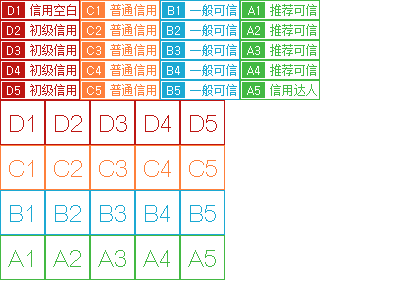
<style>
.page{position:relative;width:400px;height:300px;background:#ffffff}
.page>*{position:absolute;margin:0}
.t1{font:12px "Dotum";color:#ffffff}
.t2{font:12px "SimSun";color:#bd1613}
.t3{font:12px "SimSun";color:#fe803b}
.t4{font:12px "SimSun";color:#1ca9d3}
.t5{font:12px "SimSun";color:#43b943}
.t6{font:36px "BrowalliaNew";color:#bd1613}
.t7{font:36px "BrowalliaNew";color:#fe803b}
.t8{font:36px "BrowalliaNew";color:#1ca9d3}
.t9{font:36px "BrowalliaNew";color:#43b943}
</style>
<div class="page">
<p class="t1" style="left:8px;top:6px;width:11px;height:9px">D1</p>
<p class="t2" style="left:30px;top:4px;width:46px;height:12px">信用空白</p>
<p class="t1" style="left:87px;top:6px;width:12px;height:9px">C1</p>
<p class="t3" style="left:110px;top:4px;width:46px;height:12px">普通信用</p>
<p class="t1" style="left:168px;top:6px;width:11px;height:9px">B1</p>
<p class="t4" style="left:190px;top:4px;width:47px;height:12px">一般可信</p>
<p class="t1" style="left:248px;top:6px;width:11px;height:9px">A1</p>
<p class="t5" style="left:270px;top:4px;width:47px;height:12px">推荐可信</p>
<p class="t1" style="left:7px;top:26px;width:13px;height:9px">D2</p>
<p class="t2" style="left:30px;top:24px;width:46px;height:12px">初级信用</p>
<p class="t1" style="left:87px;top:26px;width:14px;height:9px">C2</p>
<p class="t3" style="left:110px;top:24px;width:46px;height:12px">普通信用</p>
<p class="t1" style="left:167px;top:26px;width:13px;height:9px">B2</p>
<p class="t4" style="left:190px;top:24px;width:47px;height:12px">一般可信</p>
<p class="t1" style="left:247px;top:26px;width:13px;height:9px">A2</p>
<p class="t5" style="left:270px;top:24px;width:47px;height:12px">推荐可信</p>
<p class="t1" style="left:7px;top:46px;width:13px;height:9px">D3</p>
<p class="t2" style="left:30px;top:44px;width:46px;height:12px">初级信用</p>
<p class="t1" style="left:87px;top:46px;width:14px;height:9px">C3</p>
<p class="t3" style="left:110px;top:44px;width:46px;height:12px">普通信用</p>
<p class="t1" style="left:167px;top:46px;width:13px;height:9px">B3</p>
<p class="t4" style="left:190px;top:44px;width:47px;height:12px">一般可信</p>
<p class="t1" style="left:247px;top:46px;width:13px;height:9px">A3</p>
<p class="t5" style="left:270px;top:44px;width:47px;height:12px">推荐可信</p>
<p class="t2" style="left:30px;top:64px;width:46px;height:12px">初级信用</p>
<p class="t3" style="left:110px;top:64px;width:46px;height:12px">普通信用</p>
<p class="t4" style="left:190px;top:64px;width:47px;height:12px">一般可信</p>
<p class="t5" style="left:270px;top:64px;width:47px;height:12px">推荐可信</p>
<p class="t1" style="left:7px;top:66px;width:13px;height:9px">D4</p>
<p class="t1" style="left:87px;top:66px;width:14px;height:9px">C4</p>
<p class="t1" style="left:167px;top:66px;width:13px;height:9px">B4</p>
<p class="t1" style="left:247px;top:66px;width:13px;height:9px">A4</p>
<p class="t1" style="left:7px;top:86px;width:13px;height:9px">D5</p>
<p class="t2" style="left:30px;top:84px;width:46px;height:12px">初级信用</p>
<p class="t1" style="left:87px;top:86px;width:14px;height:9px">C5</p>
<p class="t3" style="left:110px;top:84px;width:46px;height:12px">普通信用</p>
<p class="t1" style="left:167px;top:86px;width:13px;height:9px">B5</p>
<p class="t4" style="left:190px;top:84px;width:47px;height:12px">一般可信</p>
<p class="t1" style="left:247px;top:86px;width:13px;height:9px">A5</p>
<p class="t5" style="left:270px;top:84px;width:47px;height:12px">信用达人</p>
<p class="t6" style="left:10px;top:115px;width:23px;height:17px">D1</p>
<p class="t6" style="left:55px;top:115px;width:27px;height:17px">D2</p>
<p class="t6" style="left:100px;top:115px;width:27px;height:17px">D3</p>
<p class="t6" style="left:145px;top:115px;width:26px;height:17px">D4</p>
<p class="t6" style="left:190px;top:115px;width:27px;height:17px">D5</p>
<p class="t7" style="left:9px;top:160px;width:24px;height:17px">C1</p>
<p class="t7" style="left:54px;top:160px;width:28px;height:17px">C2</p>
<p class="t7" style="left:99px;top:160px;width:28px;height:17px">C3</p>
<p class="t7" style="left:144px;top:160px;width:27px;height:17px">C4</p>
<p class="t7" style="left:189px;top:160px;width:28px;height:17px">C5</p>
<p class="t8" style="left:10px;top:205px;width:22px;height:17px">B1</p>
<p class="t8" style="left:55px;top:205px;width:26px;height:17px">B2</p>
<p class="t8" style="left:100px;top:205px;width:26px;height:17px">B3</p>
<p class="t8" style="left:145px;top:205px;width:25px;height:17px">B4</p>
<p class="t8" style="left:190px;top:205px;width:26px;height:17px">B5</p>
<p class="t9" style="left:8px;top:250px;width:24px;height:17px">A1</p>
<p class="t9" style="left:53px;top:250px;width:28px;height:17px">A2</p>
<p class="t9" style="left:98px;top:250px;width:28px;height:17px">A3</p>
<p class="t9" style="left:143px;top:250px;width:27px;height:17px">A4</p>
<p class="t9" style="left:188px;top:250px;width:28px;height:17px">A5</p>
</div>
